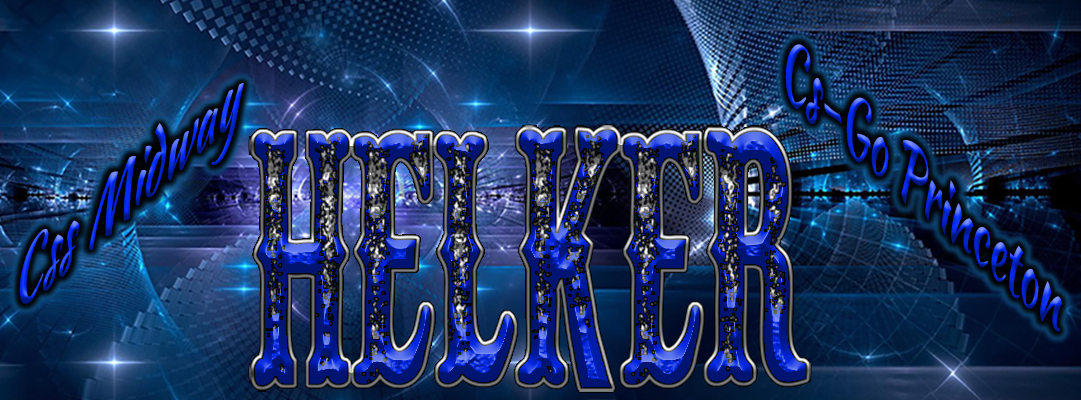
<style>
.page{position:relative;width:1081px;height:400px}
.page>*{position:absolute;margin:0}
.t1{font:85.1px "KaushanScript-Regular";scale:0.64 1}
.t2{font:75.3px "KaushanScript-Regular";scale:0.84 1}
</style>
<div class="page">
<p class="t1" style="left:785px;top:44px;width:278px;height:288px;rotate:41deg">Cs-Go Princeton</p>
<p class="t2" style="left:19px;top:83px;width:225px;height:221px;rotate:-40deg">Css Midway</p>
</div>
